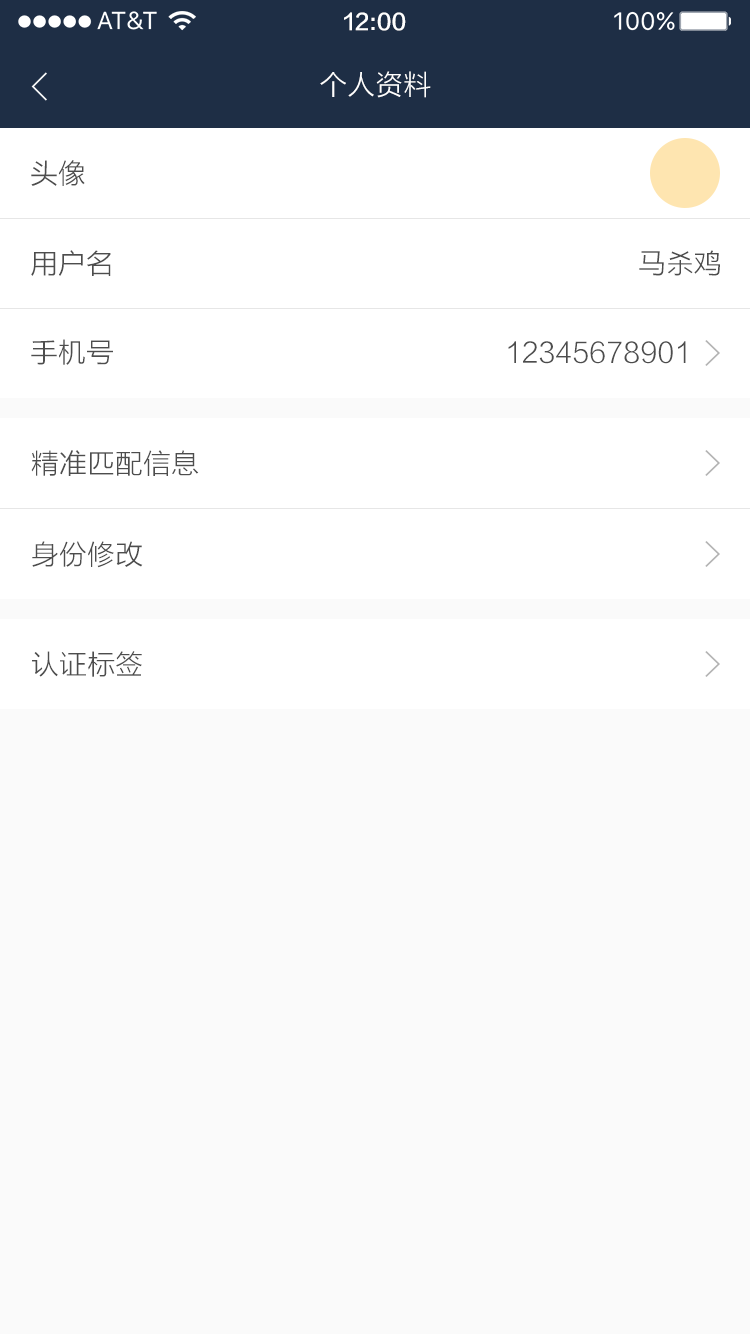
<style>
.page{position:relative;width:750px;height:1334px;background:#fafafa}
.page>*{position:absolute;margin:0}
.t1{font:22px "FZLTZHK--GBK1-0";color:#ffffff}
.t2{font:28px "FZLTXHK";color:#ffffff}
.t3{font:28px "FZLTXHK";color:#4d4d4d}
</style>
<div class="page">
<p class="t1" style="left:344px;top:12px;width:62px;height:19px">12:00</p>
<p class="t2" style="left:320px;top:71px;width:111px;height:27px">个人资料</p>
<p class="t3" style="left:31px;top:160px;width:54px;height:26px">头像</p>
<p class="t3" style="left:31px;top:250px;width:80px;height:26px">用户名</p>
<p class="t3" style="left:639px;top:250px;width:81px;height:26px">马杀鸡</p>
<p class="t3" style="left:31px;top:339px;width:82px;height:26px">手机号</p>
<p class="t3" style="left:508px;top:341px;width:178px;height:23px">12345678901</p>
<p class="t3" style="left:31px;top:450px;width:168px;height:26px">精准匹配信息</p>
<p class="t3" style="left:32px;top:541px;width:111px;height:27px">身份修改</p>
<p class="t3" style="left:32px;top:651px;width:110px;height:26px">认证标签</p>
</div>
